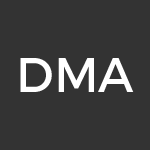
<style>
.page{position:relative;width:150px;height:150px;background:#333333}
.page>*{position:absolute;margin:0}
.t1{font:48px "Montserrat-Regular";color:#ffffff}
</style>
<div class="page">
<p class="t1" style="left:20px;top:58px;width:114px;height:34px">DMA</p>
</div>
